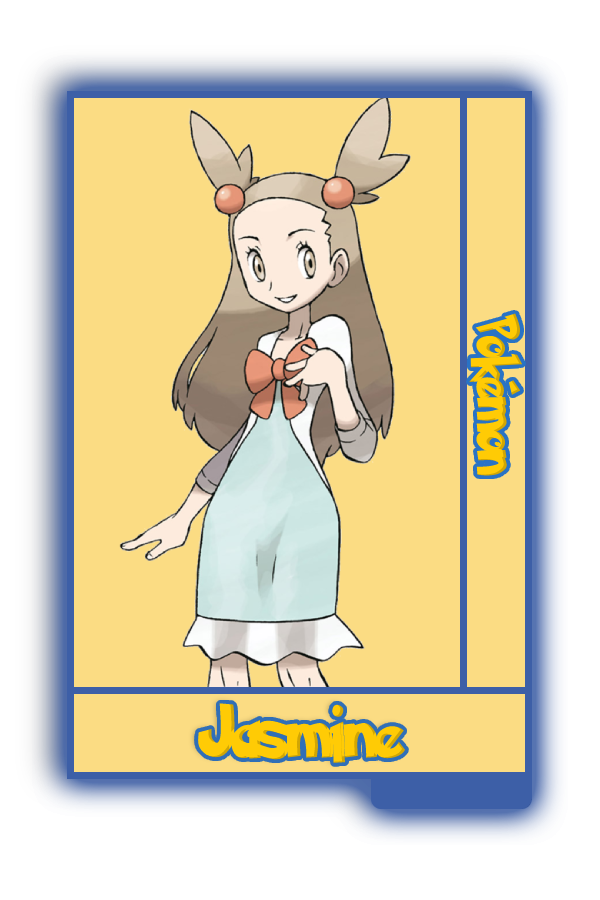
<style>
.page{position:relative;width:600px;height:900px;background:#fbdc83}
.page>*{position:absolute;margin:0}
.t1{font:48.8px "PokemonSolidNormal";color:#ffcb05;scale:0.8 1}
.t2{font:56.6px "PokemonSolidNormal";color:#ffcb05;scale:0.92 1}
</style>
<div class="page">
<p class="t1" style="left:469px;top:313px;width:54px;height:163px;rotate:90deg">Pokémon</p>
<p class="t2" style="left:198px;top:703px;width:208px;height:60px">Jasmine</p>
</div>
